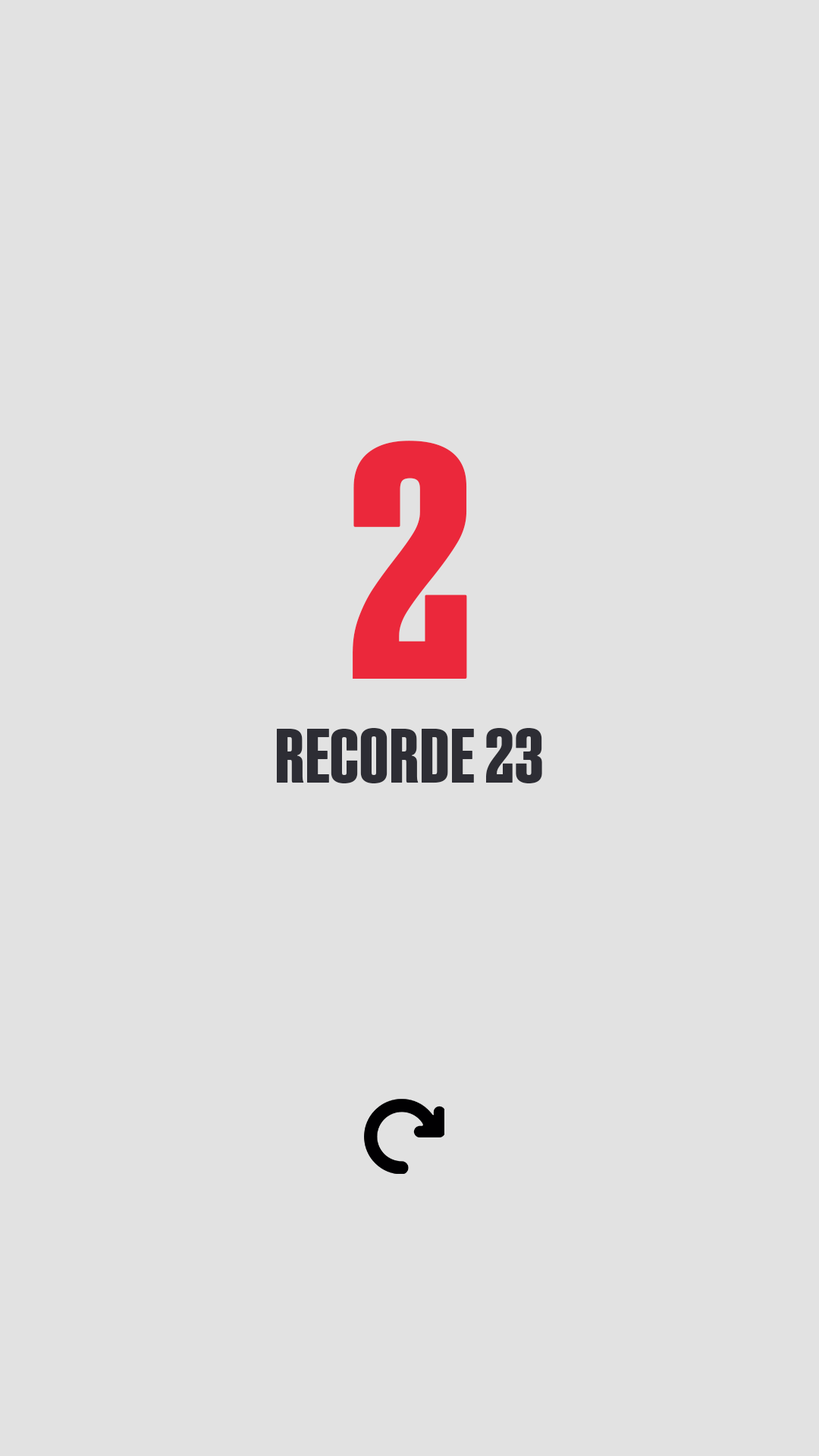
<style>
.page{position:relative;width:819px;height:1456px;background:#e2e2e2}
.page>*{position:absolute;margin:0}
.t1{font:331.4px "Fixture-CondensedBold";letter-spacing:-0.03em;color:#eb283b;text-transform:uppercase}
.t2{font:76.6px "Fixture-CondensedBold";letter-spacing:-0.03em;color:#2d2d34;text-transform:uppercase}
</style>
<div class="page">
<p class="t1" style="left:353px;top:441px;width:114px;height:238px">2</p>
<p class="t2" style="left:277px;top:728px;width:265px;height:55px">recorde 23</p>
</div>
